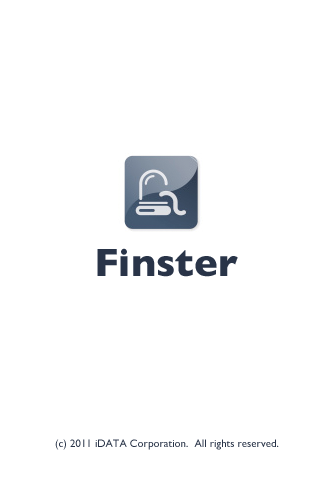
<style>
.page{position:relative;width:320px;height:480px;background:#ffffff}
.page>*{position:absolute;margin:0}
.t1{font:39.9px "GillSans-Bold";color:#293448}
.t2{font:11px "GillSans";color:#293448}
</style>
<div class="page">
<p class="t1" style="left:97px;top:248px;width:141px;height:29px">Finster</p>
<p class="t2" style="left:55px;top:439px;width:224px;height:11px">(c) 2011 iDATA Corporation.  All rights reserved.</p>
</div>
